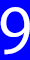
<style>
.page{position:relative;width:30px;height:60px;background:#0000ff}
.page>*{position:absolute;margin:0}
.t1{font:60.7px "KozGoPr6N-Regular";color:#ffffff}
</style>
<div class="page">
<p class="t1" style="left:0px;top:7px;width:30px;height:48px">9</p>
</div>
